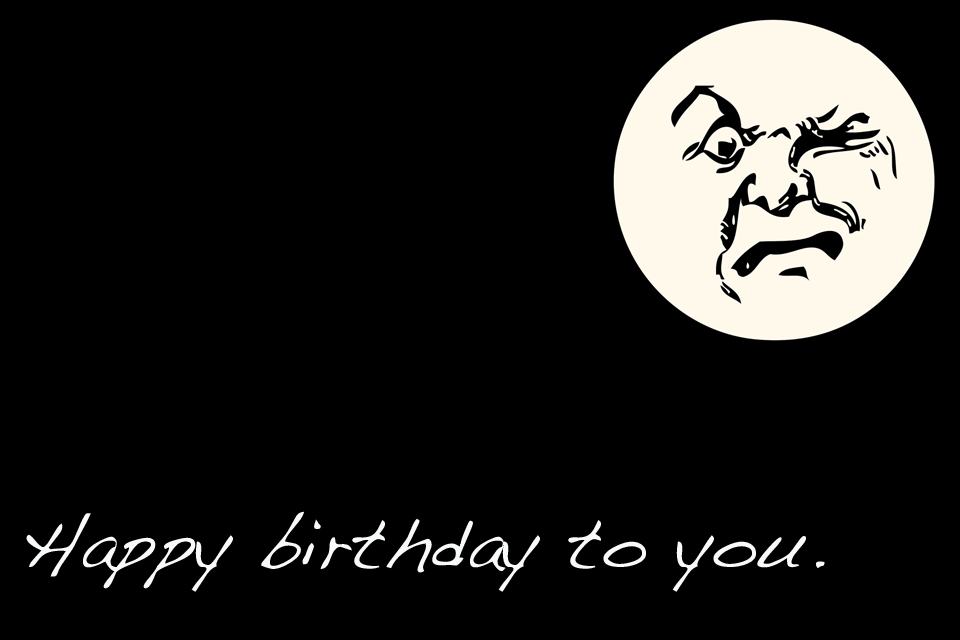
<style>
.page{position:relative;width:960px;height:640px;background:#000000}
.page>*{position:absolute;margin:0}
.t1{font:72px "Handwriting-Dakota";color:#f8fbf9}
</style>
<div class="page">
<p class="t1" style="left:26px;top:511px;width:799px;height:81px">Happy birthday to you.</p>
</div>
